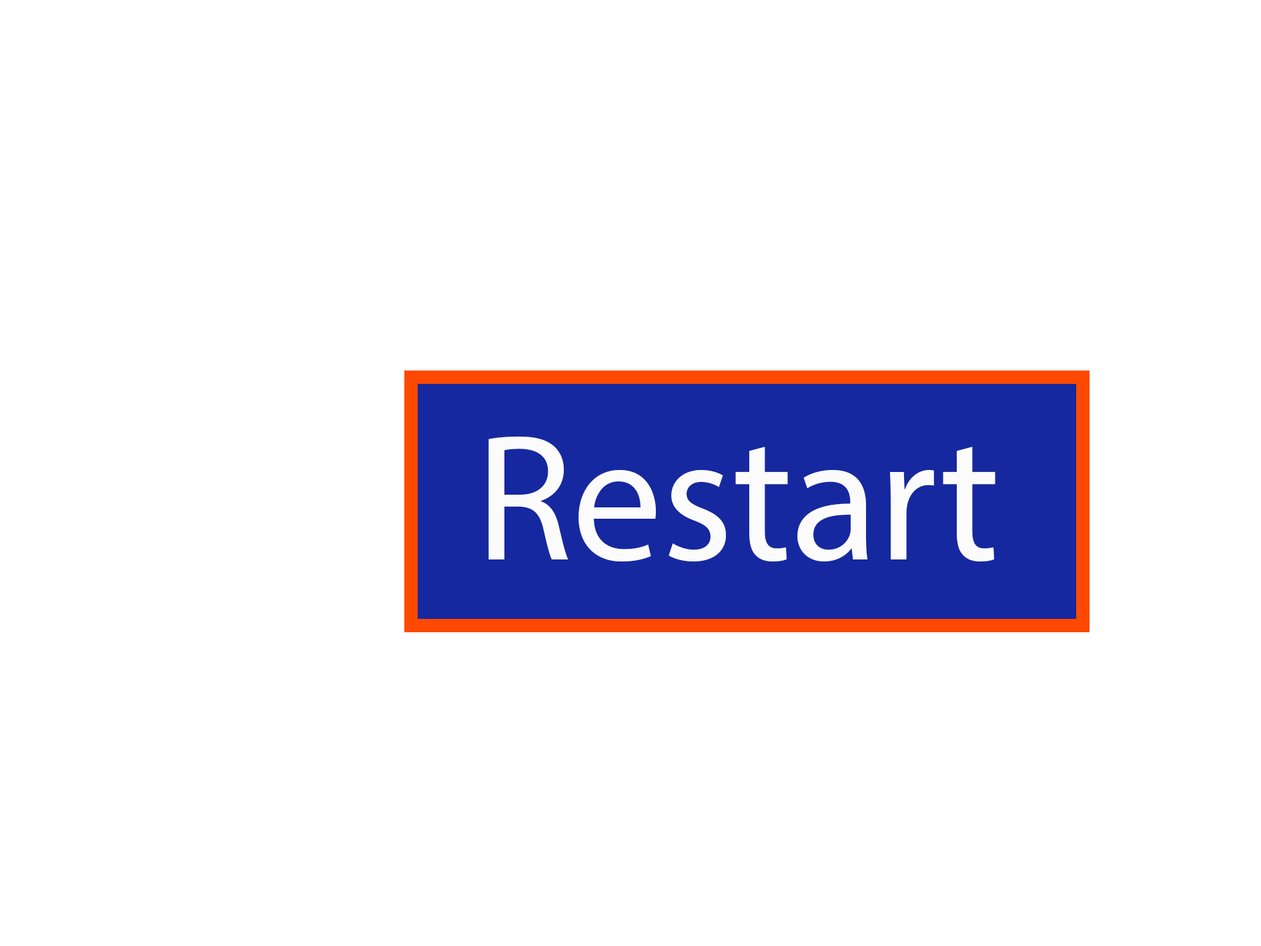
<style>
.page{position:relative;width:1261px;height:946px;background:#ffffff}
.page>*{position:absolute;margin:0}
.t1{font:180.7px "MyriadPro-Regular";letter-spacing:-0.005em;color:#fbfbfb}
.t2{font:166.8px "MyriadPro-Regular";color:#fbfbfb}
</style>
<div class="page">
<p class="t1" style="left:488px;top:436px;width:508px;height:126px"><span class="t2">  </span>Restart</p>
</div>
